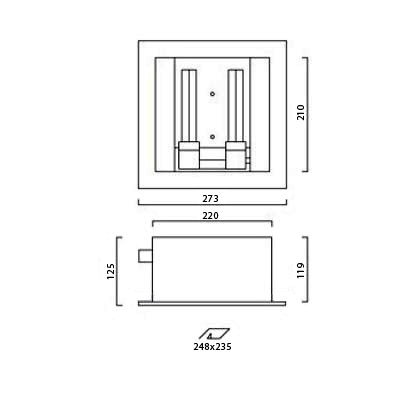
<style>
.page{position:relative;width:400px;height:400px;background:#ffffff}
.page>*{position:absolute;margin:0}
.t1{font:10px "MyriadPro-Regular";letter-spacing:0.05em;color:#000000}
</style>
<div class="page">
<p class="t1" style="left:297px;top:105px;width:7px;height:16px;rotate:-90deg">210</p>
<p class="t1" style="left:202px;top:195px;width:16px;height:7px">273</p>
<p class="t1" style="left:202px;top:212px;width:17px;height:7px">220</p>
<p class="t1" style="left:107px;top:264px;width:7px;height:16px;rotate:-90deg">125</p>
<p class="t1" style="left:297px;top:263px;width:7px;height:16px;rotate:-90deg">119</p>
<p class="t1" style="left:193px;top:343px;width:38px;height:7px">248x235</p>
</div>
